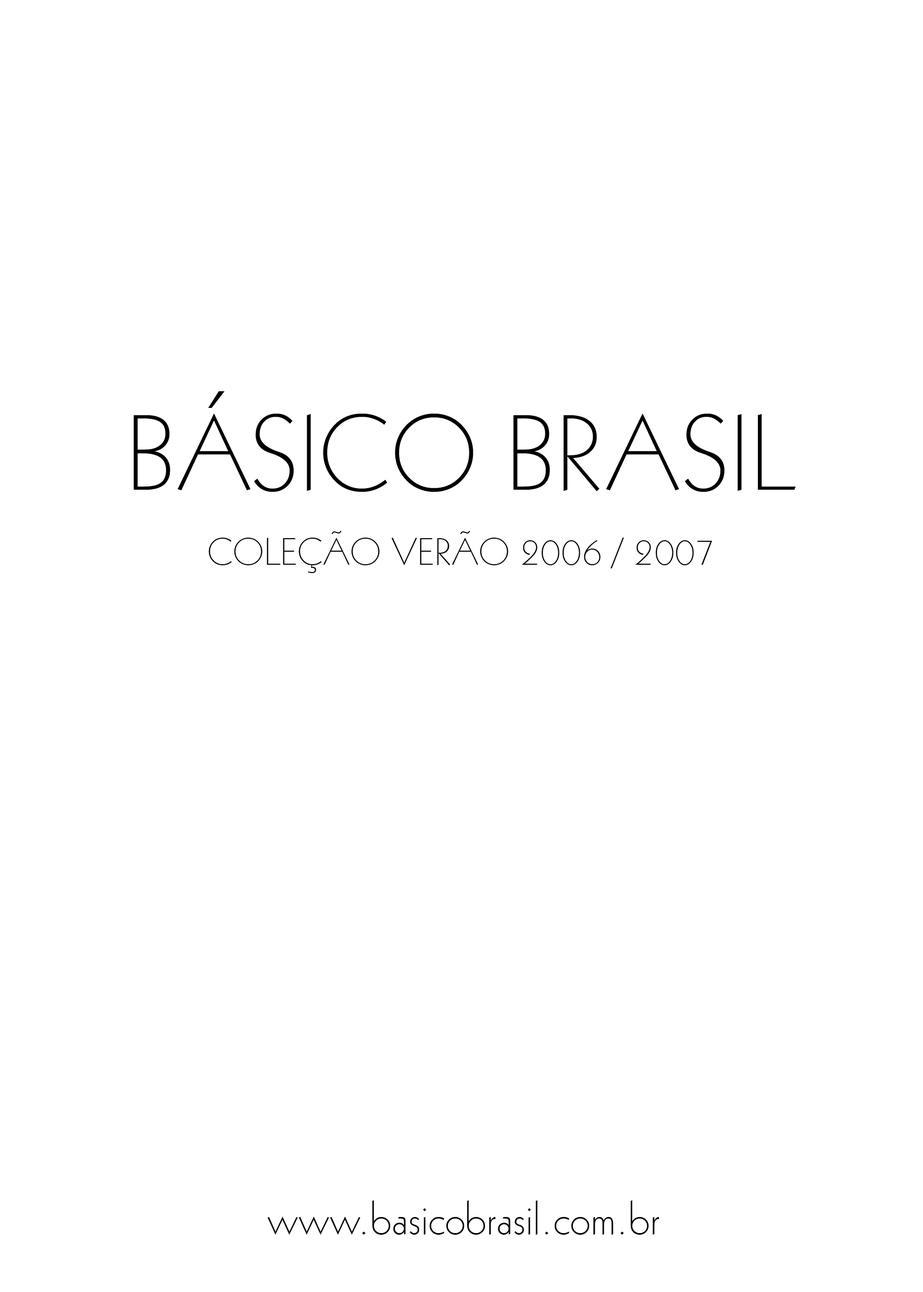
<style>
.page{position:relative;width:923px;height:1292px;background:#ffffff}
.page>*{position:absolute;margin:0}
.t1{font:104.2px "Geometric231BT-LightC";color:#000000}
.t2{font:37.5px "Geometric231BT-LightC";color:#000000}
.t3{font:46.9px "Geometric231BT-LightC";color:#000000}
</style>
<div class="page">
<p class="t1" style="left:133px;top:391px;width:663px;height:101px">BÁSICO BRASIL</p>
<p class="t2" style="left:208px;top:531px;width:504px;height:42px">COLEÇÃO VERÃO 2006 / 2007</p>
<p class="t3" style="left:267px;top:1200px;width:392px;height:35px">www.basicobrasil.com.br</p>
</div>
